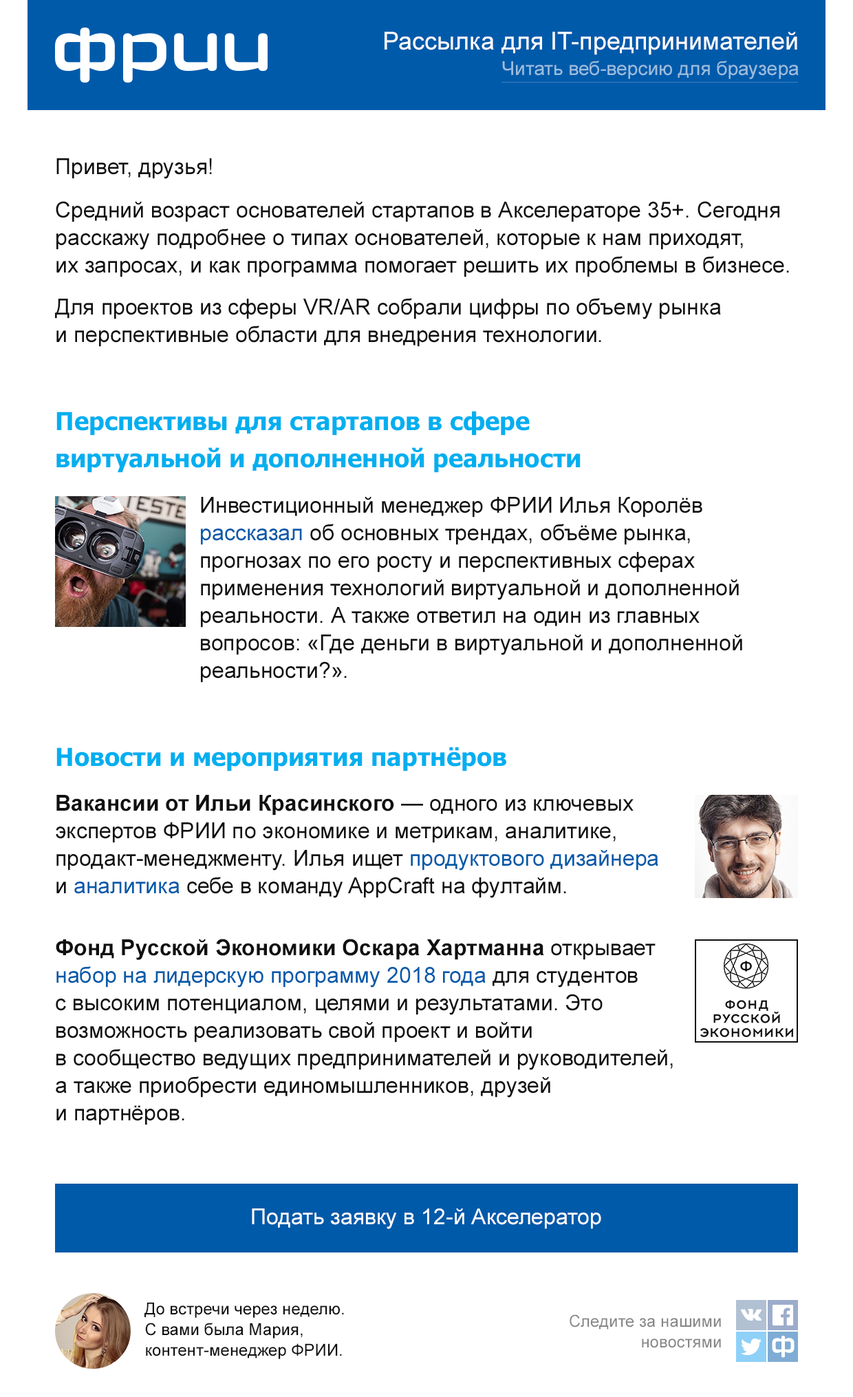
<style>
.page{position:relative;width:853px;height:1397px;background:#ffffff}
.page>*{position:absolute;margin:0}
.t1{font:24.8px "ArialMT";color:#ffffff}
.t2{font:19.3px "ArialMT";color:#99bddd}
.t3{font:22px "ArialMT";color:#101010}
.t4{font:22px/27.5px "ArialMT";color:#101010}
.t5{font:24.8px/37.2px "Tahoma-Bold";color:#00aff0}
.t6{font:22px/27.5px "ArialMT";color:#005aaa}
.t7{font:24.8px "Tahoma-Bold";color:#00aff0}
.t8{font:22px/27.5px "Arial-BoldMT";color:#101010}
.t9{font:22px "ArialMT";color:#ffffff}
.t10{font:16.5px/20.6px "ArialMT";color:#101010}
.t11{font:16.5px/20.6px "ArialMT";color:#878787}
</style>
<div class="page">
<p class="t1" style="left:385px;top:32px;width:413px;height:23px">Рассылка для IT-предпринимателей</p>
<p class="t2" style="left:502px;top:61px;width:297px;height:18px">Читать веб-версию для браузера</p>
<p class="t3" style="left:56px;top:158px;width:156px;height:21px">Привет, друзья!</p>
<p class="t4" style="left:56px;top:201px;width:733px;height:76px">Cредний возраст основателей стартапов в Акселераторе 35+. Сегодня<br>расскажу подробнее о типах основателей, которые к нам приходят,<br>их запросах, и как программа помогает решить их проблемы в бизнесе.</p>
<p class="t4" style="left:55px;top:298px;width:666px;height:49px">Для проектов из сферы VR/AR собрали цифры по объему рынка<br>и перспективные области для внедрения технологии.</p>
<p class="t5" style="left:56px;top:411px;width:525px;height:62px">Перспективы для стартапов в сфере<br>виртуальной и дополненной реальности</p>
<p class="t4" style="left:201px;top:497px;width:542px;height:186px">Инвестиционный менеджер ФРИИ Илья Королёв <br><span class="t6">рассказал</span> об основных трендах, объёме рынка, <br>прогнозах по его росту и перспективных сферах <br>применения технологий виртуальной и дополненной <br>реальности. А также ответил на один из главных <br>вопросов: «Где деньги в виртуальной и дополненной<br>реальности?».</p>
<p class="t7" style="left:56px;top:747px;width:451px;height:25px">Новости и мероприятия партнёров</p>
<p class="t4" style="left:56px;top:795px;width:603px;height:103px"><span class="t8">Вакансии от Ильи Красинского</span> — одного из ключевых <br>экспертов ФРИИ по экономике и метрикам, аналитике, <br>продакт-менеджменту. Илья ищет <span class="t6">продуктового дизайнера</span> <br>и <span class="t6">аналитика</span> себе в команду AppCraft на фултайм.</p>
<p class="t4" style="left:56px;top:939px;width:617px;height:186px"><span class="t8">Фонд Русской Экономики Оскара Хартманна</span> открывает <br><span class="t6">набор на лидерскую программу 2018 года</span> для студентов <br>с высоким потенциалом, целями и результатами. Это <br>возможность реализовать свой проект и войти <br>в сообщество ведущих предпринимателей и руководителей, <br>а также приобреcти единомышленников, друзей<br>и партнёров.</p>
<p class="t9" style="left:252px;top:1209px;width:350px;height:20px">Подать заявку в 12-й Акселератор</p>
<p class="t10" style="left:145px;top:1302px;width:199px;height:57px">До встречи через неделю.<br>С вами была Мария,<br>контент-менеджер ФРИИ.</p>
<p class="t11" style="left:570px;top:1315px;width:151px;height:33px;text-align:right">Следите за нашими<br>новостями</p>
</div>
